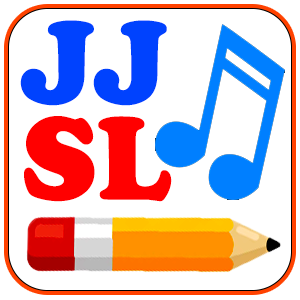
<style>
.page{position:relative;width:300px;height:300px;background:#ffffff}
.page>*{position:absolute;margin:0}
.t1{font:122.7px/95.9px "CooperBlack";color:#0042fe;scale:0.95 1}
.t2{font:122.7px/95.9px "CooperBlack";color:#ff0000;scale:0.95 1}
</style>
<div class="page">
<p class="t1" style="left:20px;top:20px;width:152px;height:182px">JJ<br><span class="t2">SL</span></p>
</div>
